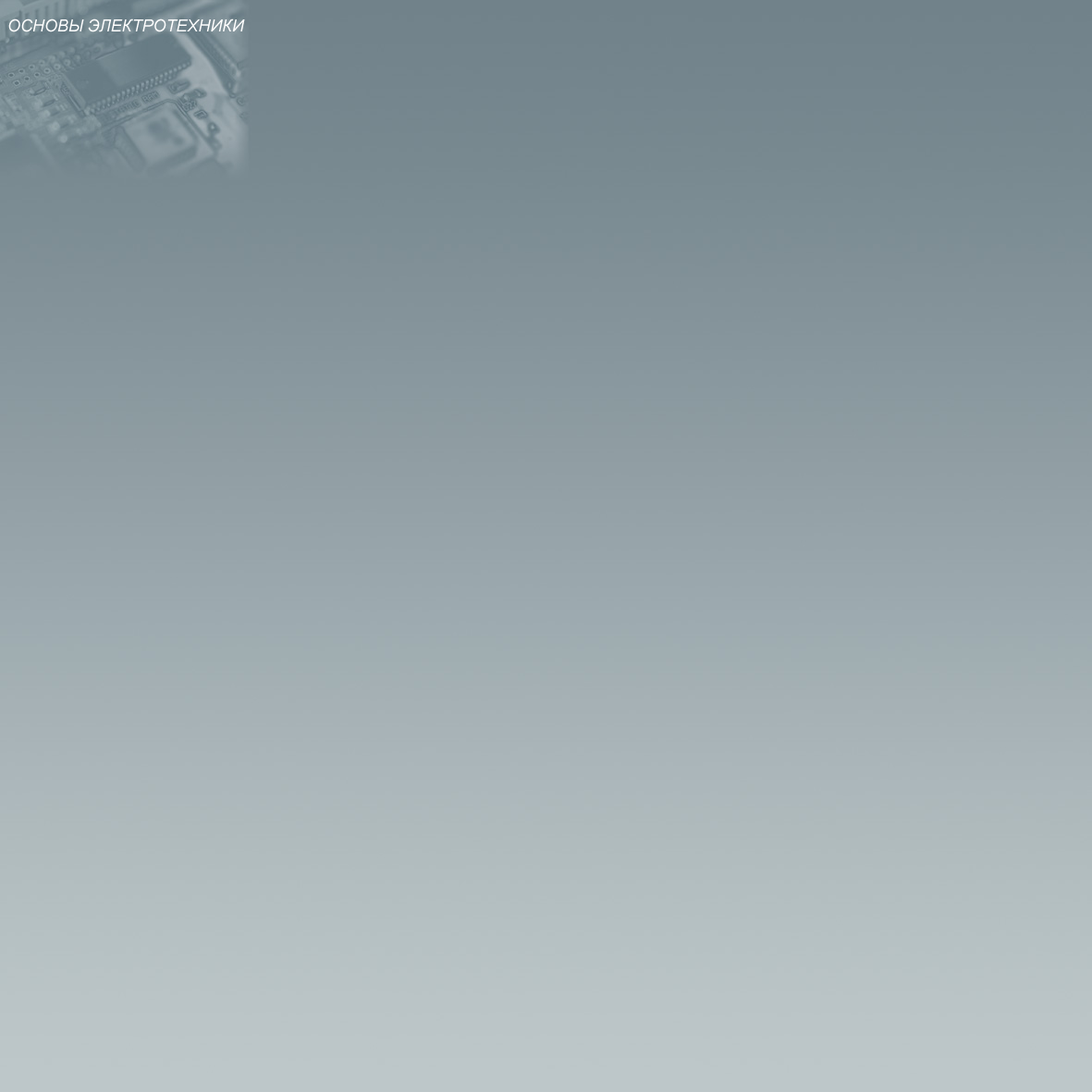
<style>
.page{position:relative;width:1092px;height:1092px}
.page>*{position:absolute;margin:0}
.t1{font:16.6px "Arial-ItalicMT";color:#ffffff}
</style>
<div class="page">
<p class="t1" style="left:8px;top:18px;width:237px;height:14px">ОСНОВЫ ЭЛЕКТРОТЕХНИКИ</p>
</div>
